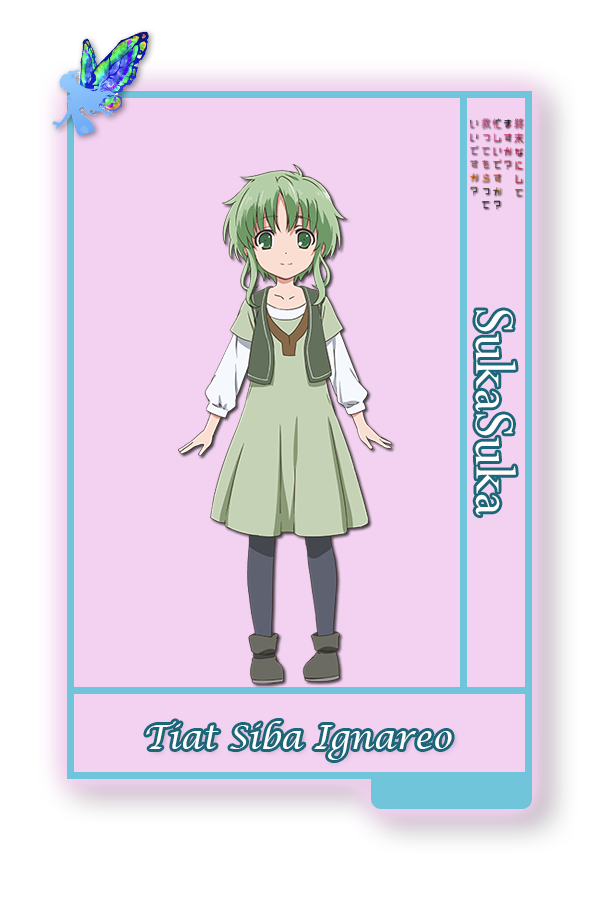
<style>
.page{position:relative;width:600px;height:900px;background:#f3d2f1}
.page>*{position:absolute;margin:0}
.t1{font:62.5px "Perpetua";color:#ffffff}
.t2{font:33.3px "LucidaCalligraphy-Italic";color:#ffffff}
</style>
<div class="page">
<p class="t1" style="left:475px;top:310px;width:41px;height:206px;rotate:90deg">SukaSuka</p>
<p class="t2" style="left:146px;top:721px;width:306px;height:39px">Tiat Siba Ignareo</p>
</div>
